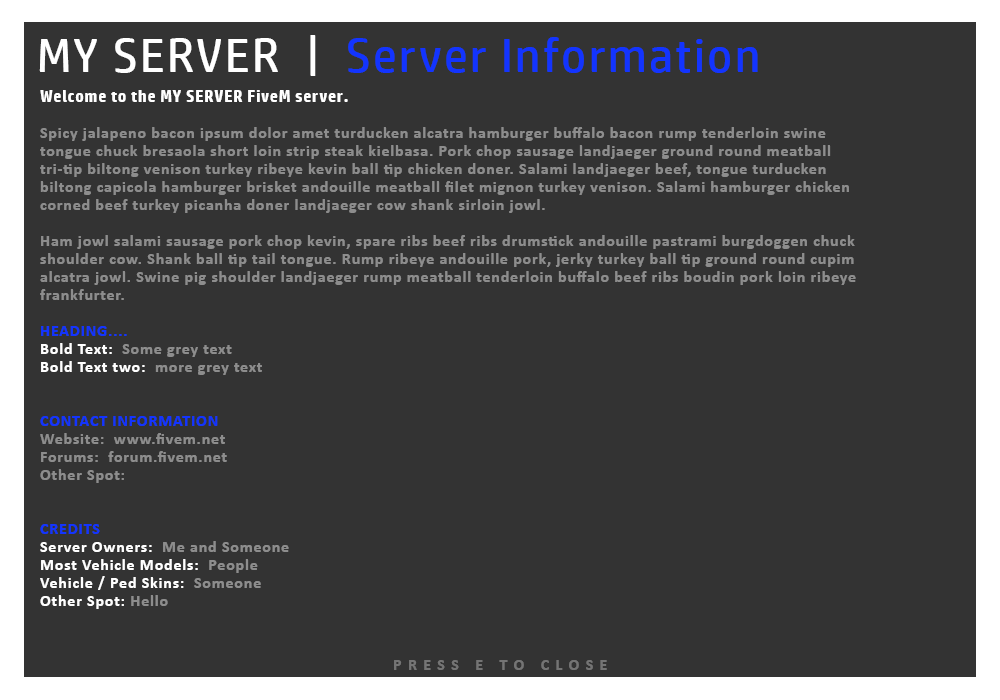
<style>
.page{position:relative;width:1000px;height:700px;background:#333333}
.page>*{position:absolute;margin:0}
.t1{font:48px "HPSimplifiedME-Regular";letter-spacing:0.05em;color:#1334ff}
.t2{font:48px "HPSimplifiedME-Regular";letter-spacing:0.05em;color:#ffffff}
.t3{font:16px/18px "Calibri-Bold";letter-spacing:0.05em;color:#8d8d8d}
.t4{font:16px/18px "HPSimplifiedME-Bold";letter-spacing:0.05em;color:#ffffff}
.t5{font:16px/18px "Calibri-Bold";letter-spacing:0.05em;color:#1334ff}
.t6{font:16px/18px "Calibri-Bold";letter-spacing:0.05em;color:#ffffff}
.t7{font:16px "Calibri-Bold";letter-spacing:0.4em;color:#747474}
</style>
<div class="page">
<p class="t1" style="left:39px;top:35px;width:719px;height:41px"><span class="t2">MY SERVER  |  </span>Server Information</p>
<p class="t3" style="left:40px;top:90px;width:816px;height:519px"><span class="t4">Welcome to the MY SERVER FiveM server.<br><br></span>Spicy jalapeno bacon ipsum dolor amet turducken alcatra hamburger buffalo bacon rump tenderloin swine <br>tongue chuck bresaola short loin strip steak kielbasa. Pork chop sausage landjaeger ground round meatball <br>tri-tip biltong venison turkey ribeye kevin ball tip chicken doner. Salami landjaeger beef, tongue turducken <br>biltong capicola hamburger brisket andouille meatball filet mignon turkey venison. Salami hamburger chicken <br>corned beef turkey picanha doner landjaeger cow shank sirloin jowl.<br><br>Ham jowl salami sausage pork chop kevin, spare ribs beef ribs drumstick andouille pastrami burgdoggen chuck <br>shoulder cow. Shank ball tip tail tongue. Rump ribeye andouille pork, jerky turkey ball tip ground round cupim <br>alcatra jowl. Swine pig shoulder landjaeger rump meatball tenderloin buffalo beef ribs boudin pork loin ribeye <br>frankfurter.<br><br><span class="t5">HEADING....<br></span><span class="t6">Bold Text: </span> Some grey text<br><span class="t6">Bold Text two: </span> more grey text<br><br><br><span class="t5">CONTACT INFORMATION<br></span>Website:  www.fivem.net<br>Forums:  forum.fivem.net<br>Other Spot:  <br><br><br><span class="t5">CREDITS<br></span><span class="t6">Server Owners:  </span>Me and Someone<br><span class="t6">Most Vehicle Models:  </span>People<br><span class="t6">Vehicle / Ped Skins:  </span>Someone<br><span class="t6">Other Spot: </span>Hello</p>
<p class="t7" style="left:394px;top:660px;width:213px;height:10px">PRESS E TO CLOSE</p>
</div>
